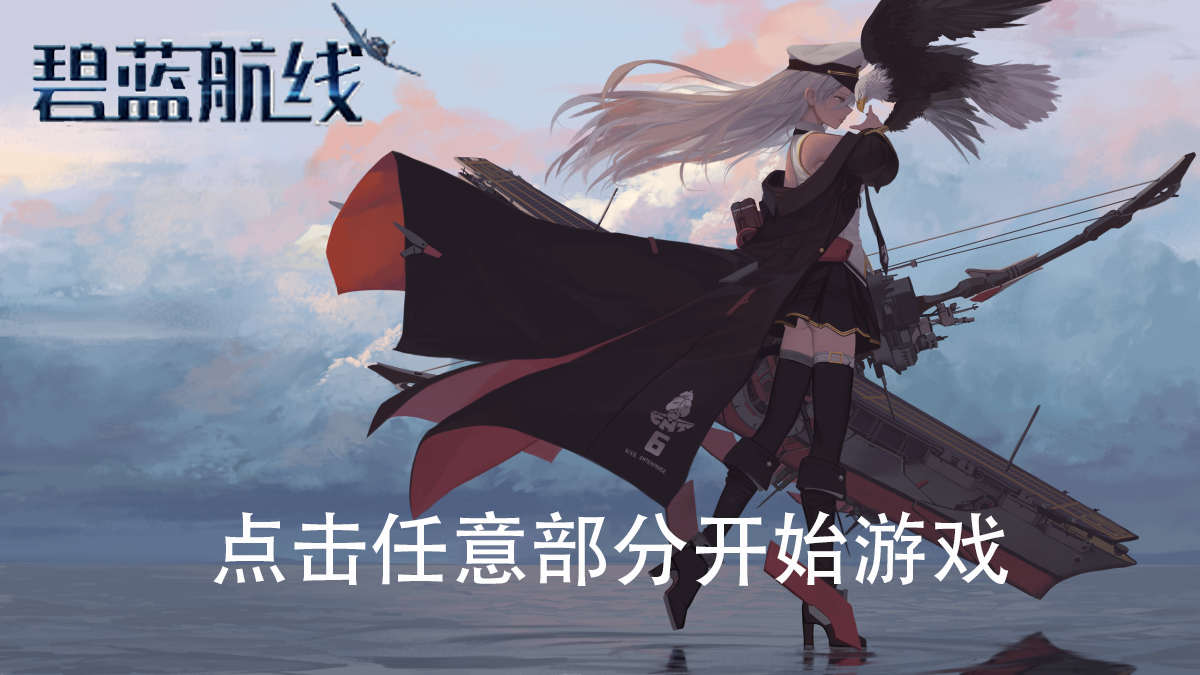
<style>
.page{position:relative;width:1200px;height:675px}
.page>*{position:absolute;margin:0}
.t1{font:80px "AdobeHeitiStd-Regular";color:#fdfdfd}
</style>
<div class="page">
<p class="t1" style="left:213px;top:511px;width:796px;height:75px">点击任意部分开始游戏</p>
</div>
